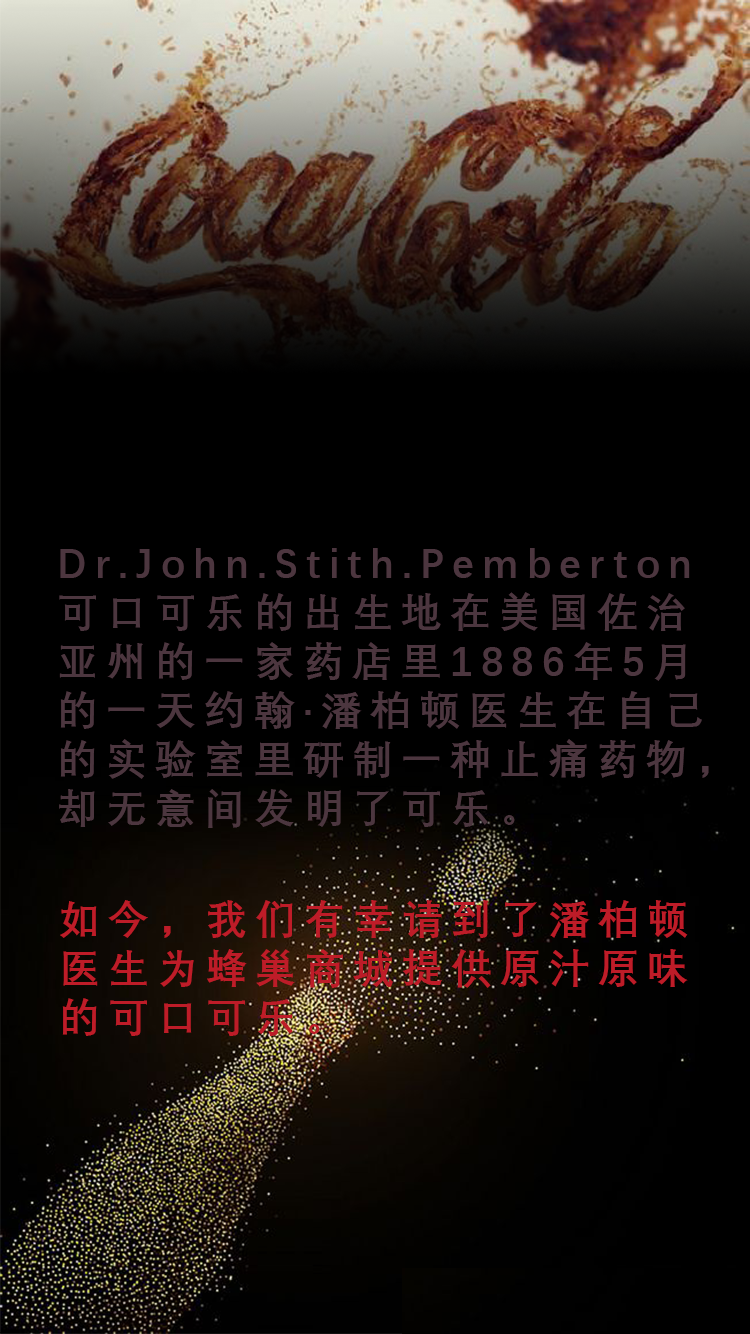
<style>
.page{position:relative;width:750px;height:1334px;background:#000000}
.page>*{position:absolute;margin:0}
.t1{font:40.9px "DengXian-Bold";letter-spacing:0.2em;color:#4c363f}
.t2{font:40.9px "DengXian-Bold";letter-spacing:0.2em;color:#be1c28}
</style>
<div class="page">
<p class="t1" style="left:59px;top:548px;width:650px;height:280px">Dr.John.Stith.Pemberton<br>可口可乐的出生地在美国佐治<br>亚州的一家药店里1886年5月<br>的一天约翰·潘柏顿医生在自己<br>的实验室里研制一种止痛药物，<br>却无意间发明了可乐。</p>
<p class="t2" style="left:60px;top:900px;width:628px;height:136px">如今，我们有幸请到了潘柏顿<br>医生为蜂巢商城提供原汁原味<br>的可口可乐。</p>
</div>
